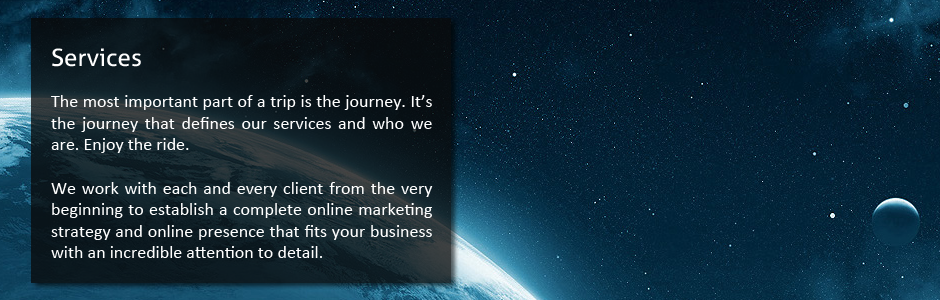
<style>
.page{position:relative;width:940px;height:300px}
.page>*{position:absolute;margin:0}
.t1{font:24px "Aller";color:#ffffff}
.t2{font:18px "Calibri";color:#ffffff}
</style>
<div class="page">
<p class="t1" style="left:52px;top:48px;width:89px;height:19px">Services</p>
<p class="t2" style="left:51px;top:95px;width:382px;height:163px;text-align:justify">The most important part of a trip is the journey. It’s the journey that defines our services and who we are. Enjoy the ride.<br><br>We work with each and every client from the very beginning to establish a complete online marketing strategy and online presence that fits your business with an incredible attention to detail.</p>
</div>
